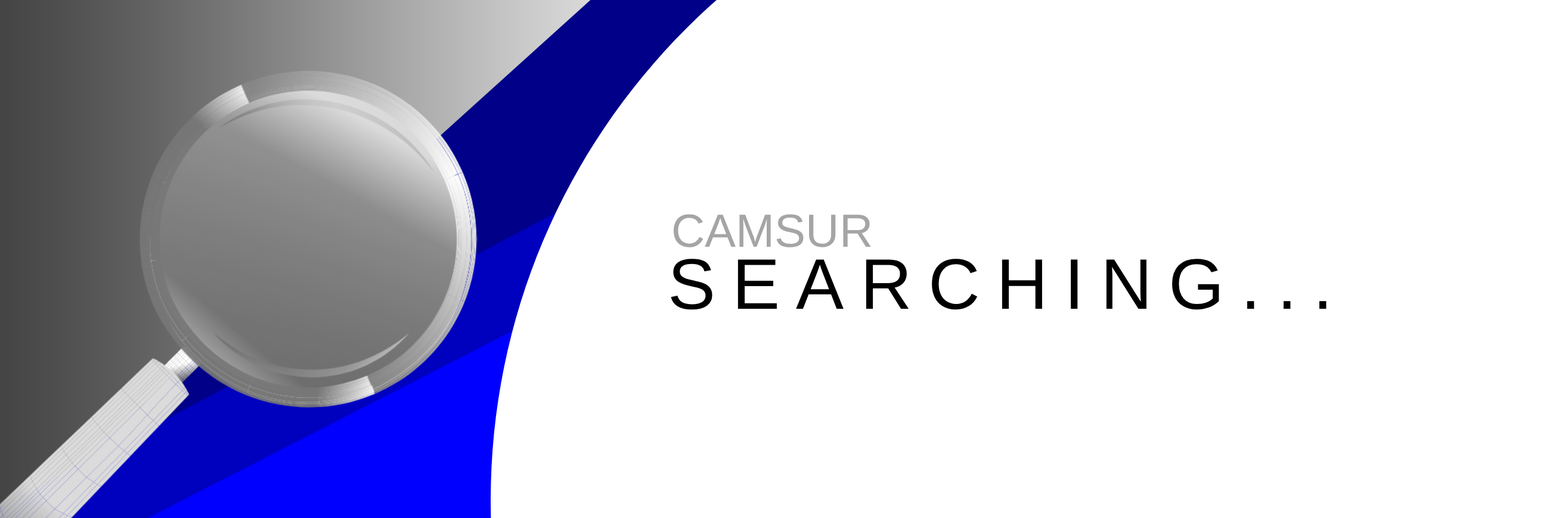
<style>
.page{position:relative;width:1568px;height:518px;background:#ffffff}
.page>*{position:absolute;margin:0}
.t1{font:46.5px "Arimo-Regular";color:#a5a5a5;text-transform:uppercase}
.t2{font:71.5px "Arimo-Regular";letter-spacing:0.229em;color:#000000;text-transform:uppercase}
</style>
<div class="page">
<p class="t1" style="left:673px;top:214px;width:198px;height:33px">camsur</p>
<p class="t2" style="left:671px;top:259px;width:656px;height:51px">searching...</p>
</div>
